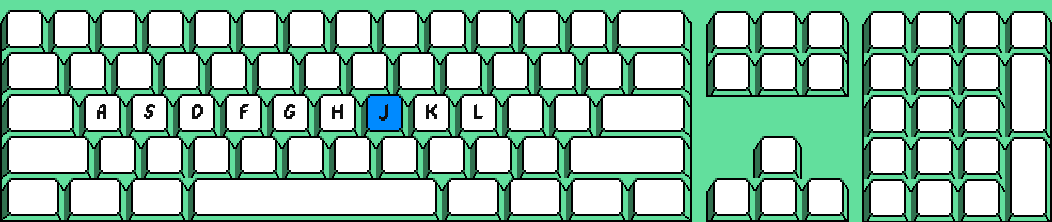
<style>
.page{position:relative;width:1052px;height:222px;background:#ffffff}
.page>*{position:absolute;margin:0}
.t1{font:24px "DPComicRegular";color:#101010}
</style>
<div class="page">
<p class="t1" style="left:97px;top:104px;width:9px;height:15px">A</p>
<p class="t1" style="left:144px;top:104px;width:11px;height:15px">S</p>
<p class="t1" style="left:192px;top:104px;width:11px;height:15px">D</p>
<p class="t1" style="left:240px;top:104px;width:9px;height:15px">F</p>
<p class="t1" style="left:284px;top:104px;width:11px;height:15px">G</p>
<p class="t1" style="left:332px;top:104px;width:11px;height:15px">H</p>
<p class="t1" style="left:379px;top:104px;width:9px;height:17px">J</p>
<p class="t1" style="left:426px;top:104px;width:11px;height:15px">K</p>
<p class="t1" style="left:474px;top:104px;width:9px;height:15px">L</p>
</div>
